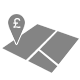
<style>
.page{position:relative;width:80px;height:80px;background:#ffffff}
.page>*{position:absolute;margin:0}
.t1{font:14px "ArialMT";color:#ffffff}
</style>
<div class="page">
<p class="t1" style="left:13px;top:18px;width:8px;height:10px">£</p>
</div>
